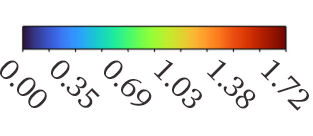
<style>
.page{position:relative;width:313px;height:136px;background:#ffffff}
.page>*{position:absolute;margin:0}
.t1{font:30px "Charter-Roman";letter-spacing:-0.02em;color:#352e31}
</style>
<div class="page">
<p class="t1" style="left:0px;top:60px;width:47px;height:48px;rotate:45deg">0.00</p>
<p class="t1" style="left:51px;top:60px;width:49px;height:48px;rotate:45deg">0.35</p>
<p class="t1" style="left:104px;top:60px;width:48px;height:46px;rotate:45deg">0.69</p>
<p class="t1" style="left:153px;top:59px;width:49px;height:49px;rotate:45deg">1.03</p>
<p class="t1" style="left:206px;top:59px;width:50px;height:50px;rotate:45deg">1.38</p>
<p class="t1" style="left:260px;top:59px;width:49px;height:52px;rotate:45deg">1.72</p>
</div>
